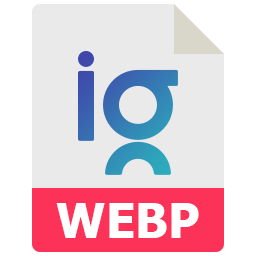
<style>
.page{position:relative;width:256px;height:256px;background:#eaeaea}
.page>*{position:absolute;margin:0}
.t1{font:48px "Tahoma-Bold";color:#ffffff}
</style>
<div class="page">
<p class="t1" style="left:56px;top:203px;width:143px;height:35px">WEBP</p>
</div>
